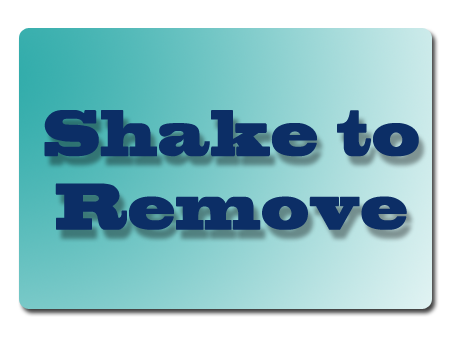
<style>
.page{position:relative;width:454px;height:340px;background:#ffffff}
.page>*{position:absolute;margin:0}
.t1{font:61.3px "BlackoakStd";color:#0c2e66;scale:0.59 1}
</style>
<div class="page">
<p class="t1" style="left:44px;top:110px;width:375px;height:120px;text-align:center">Shake to <br>Remove</p>
</div>
